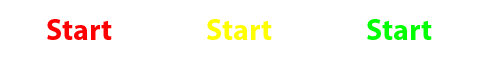
<style>
.page{position:relative;width:480px;height:60px;background:#ffffff}
.page>*{position:absolute;margin:0}
.t1{font:30px "MyriadPro-Bold";color:#ff0000}
.t2{font:30px "MyriadPro-Bold";color:#ffff00}
.t3{font:30px "MyriadPro-Bold";color:#00ff00}
</style>
<div class="page">
<p class="t1" style="left:47px;top:19px;width:65px;height:21px">Start</p>
<p class="t2" style="left:207px;top:19px;width:65px;height:21px">Start</p>
<p class="t3" style="left:367px;top:19px;width:65px;height:21px">Start</p>
</div>
